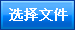
<style>
.page{position:relative;width:75px;height:30px}
.page>*{position:absolute;margin:0}
.t1{font:14px "SimSun";color:#fefeff;font-weight:bold}
</style>
<div class="page">
<p class="t1" style="left:9px;top:8px;width:59px;height:13px">选择文件</p>
</div>
